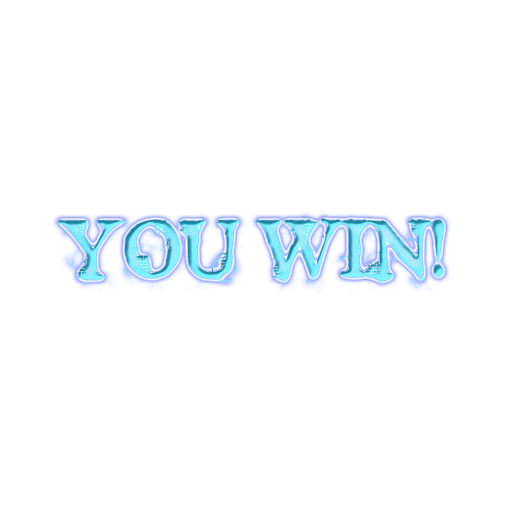
<style>
.page{position:relative;width:512px;height:512px;background:#ffffff}
.page>*{position:absolute;margin:0}
.t1{font:84px "TimesNewYorker"}
</style>
<div class="page">
<p class="t1" style="left:57px;top:209px;width:397px;height:85px">YOU WIN!</p>
</div>
